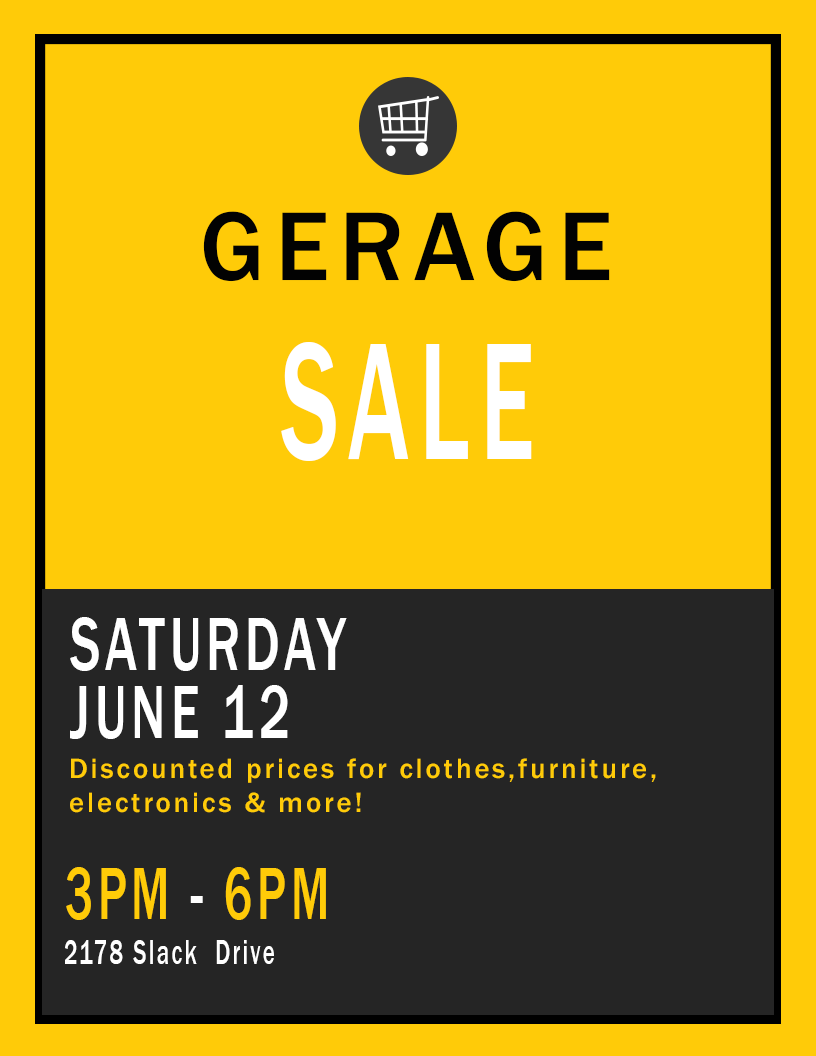
<style>
.page{position:relative;width:816px;height:1056px;background:#ffcb08}
.page>*{position:absolute;margin:0}
.t1{font:100.8px "FranklinGothic-Medium";letter-spacing:0.1em;color:#020202}
.t2{font:172.7px "FranklinGothic-Medium";letter-spacing:0.1em;color:#ffffff;scale:0.58 1}
.t3{font:78.1px "FranklinGothic-Medium";letter-spacing:0.1em;color:#ffffff;scale:0.67 1}
.t4{font:28.6px "FranklinGothic-Medium";letter-spacing:0.1em;color:#ffcb08}
.t5{font:77.2px "FranklinGothic-Medium";letter-spacing:0.1em;color:#ffcb08;scale:0.62 1}
.t6{font:77.2px "FranklinGothic-Medium";letter-spacing:0.1em;color:#ffffff;scale:0.62 1}
.t7{font:36px "FranklinGothic-Medium";letter-spacing:0.1em;color:#ffffff;scale:0.64 1}
</style>
<div class="page">
<p class="t1" style="left:203px;top:211px;width:407px;height:71px">GERAGE</p>
<p class="t2" style="left:281px;top:342px;width:251px;height:119px">SALE</p>
<p class="t3" style="left:70px;top:617px;width:277px;height:54px">SATURDAY</p>
<p class="t3" style="left:70px;top:685px;width:218px;height:54px">JUNE 12</p>
<p class="t4" style="left:70px;top:758px;width:586px;height:55px">Discounted prices for clothes,furniture,<br>electronics &amp; more!</p>
<p class="t5" style="left:66px;top:867px;width:260px;height:53px">3PM<span class="t6"> - </span>6PM</p>
<p class="t7" style="left:65px;top:940px;width:209px;height:24px">2178 Slack  Drive</p>
</div>
